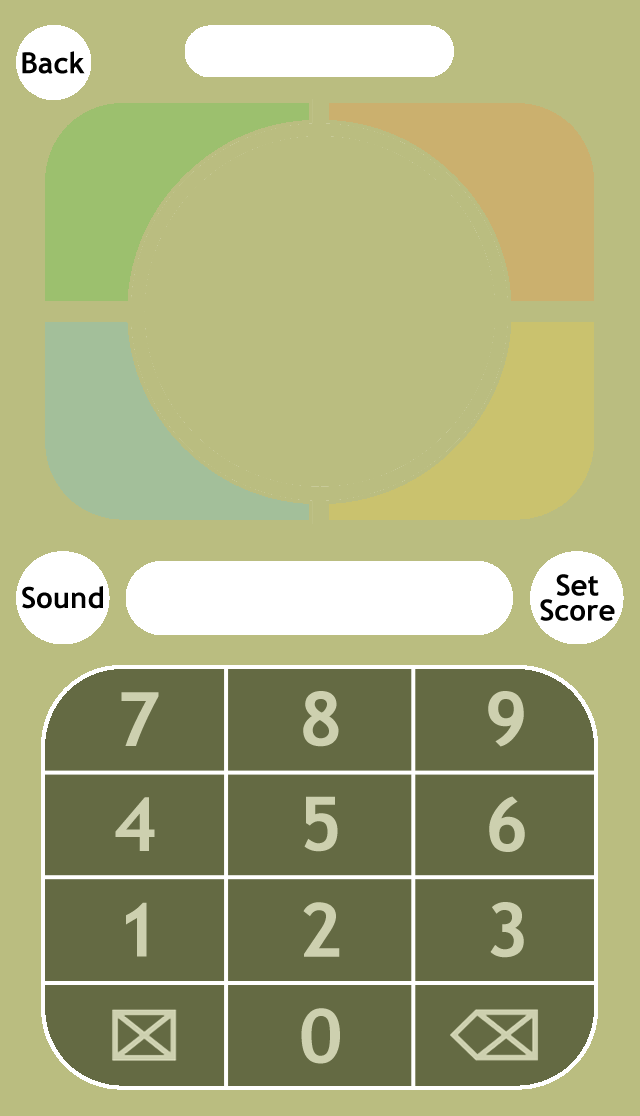
<style>
.page{position:relative;width:640px;height:1116px;background:#babd80}
.page>*{position:absolute;margin:0}
.t1{font:29.2px "TrebuchetMS-Bold";letter-spacing:0.005em;color:#000000}
.t2{font:29.2px/25px "TrebuchetMS-Bold";letter-spacing:0.005em;color:#000000}
.t3{font:75px "TrebuchetMS-Bold";letter-spacing:0.1em;color:#cdd0af}
</style>
<div class="page">
<p class="t1" style="left:22px;top:51px;width:63px;height:23px">Back</p>
<p class="t2" style="left:540px;top:574px;width:75px;height:47px;text-align:center">Set<br>Score</p>
<p class="t1" style="left:22px;top:586px;width:81px;height:23px">Sound</p>
<p class="t3" style="left:121px;top:692px;width:38px;height:54px">7</p>
<p class="t3" style="left:303px;top:691px;width:36px;height:56px">8</p>
<p class="t3" style="left:488px;top:691px;width:36px;height:56px">9</p>
<p class="t3" style="left:115px;top:797px;width:40px;height:54px">4</p>
<p class="t3" style="left:304px;top:796px;width:34px;height:56px">5</p>
<p class="t3" style="left:489px;top:796px;width:36px;height:56px">6</p>
<p class="t3" style="left:126px;top:902px;width:21px;height:55px">1</p>
<p class="t3" style="left:303px;top:902px;width:37px;height:55px">2</p>
<p class="t3" style="left:490px;top:902px;width:34px;height:56px">3</p>
<p class="t3" style="left:301px;top:1008px;width:39px;height:56px">0</p>
</div>
